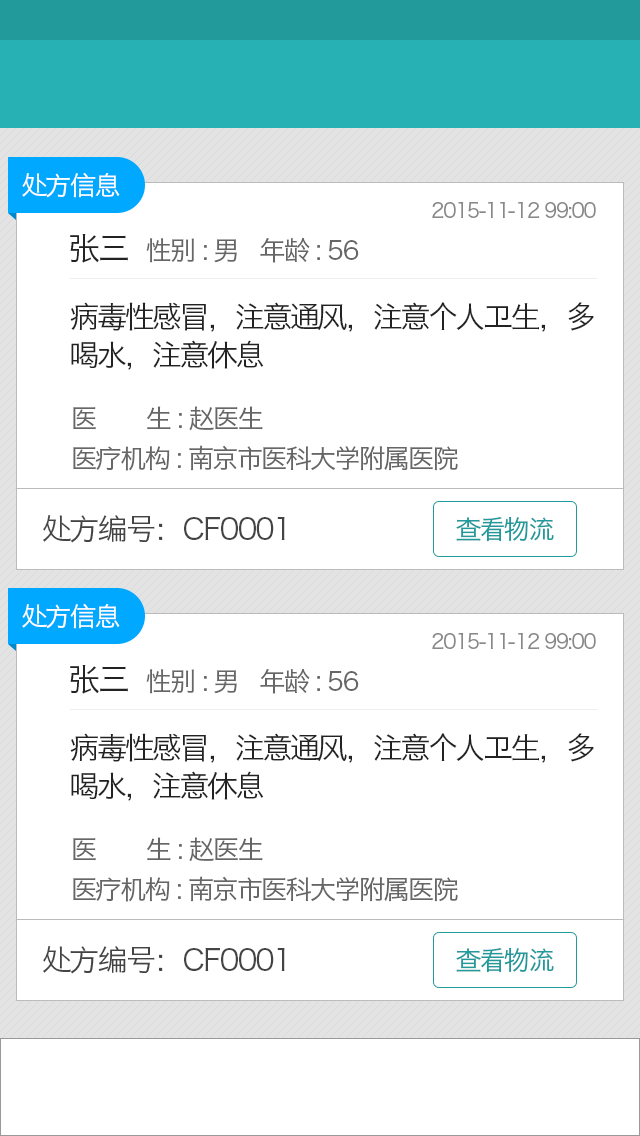
<style>
.page{position:relative;width:640px;height:1136px;background:#ffffff}
.page>*{position:absolute;margin:0}
.t1{font:26px "HiraginoSansGB-W3";letter-spacing:-0.06em;color:#fefefe}
.t2{font:20px "HiraginoSansGB-W3";letter-spacing:-0.06em;color:#888888}
.t3{font:26px "HiraginoSansGB-W3";letter-spacing:-0.06em;color:#666666}
.t4{font:32px "HiraginoSansGB-W3";letter-spacing:-0.06em;color:#222222}
.t5{font:30px/38.3px "HiraginoSansGB-W3";letter-spacing:-0.08em;color:#222222}
.t6{font:30px "HiraginoSansGB-W3";letter-spacing:-0.06em;color:#444444}
.t7{font:26px "HiraginoSansGB-W3";letter-spacing:-0.06em;color:#229a9c}
</style>
<div class="page">
<p class="t1" style="left:22px;top:173px;width:98px;height:25px">处方信息</p>
<p class="t2" style="left:432px;top:202px;width:164px;height:16px">2015-11-12 99:00</p>
<p class="t3" style="left:70px;top:234px;width:289px;height:29px"><span class="t4">张三  </span>性别 : 男   年龄 : 56</p>
<p class="t5" style="left:70px;top:302px;width:524px;height:68px">病毒性感冒，注意通风，注意个人卫生，多<br>喝水，注意休息</p>
<p class="t3" style="left:73px;top:406px;width:190px;height:25px">医       生 : 赵医生</p>
<p class="t3" style="left:73px;top:445px;width:385px;height:26px">医疗机构 : 南京市医科大学附属医院</p>
<p class="t6" style="left:43px;top:515px;width:242px;height:28px">处方编号：CF0001</p>
<p class="t7" style="left:456px;top:516px;width:98px;height:26px">查看物流</p>
<p class="t1" style="left:22px;top:604px;width:98px;height:25px">处方信息</p>
<p class="t2" style="left:432px;top:633px;width:164px;height:16px">2015-11-12 99:00</p>
<p class="t3" style="left:70px;top:665px;width:289px;height:29px"><span class="t4">张三  </span>性别 : 男   年龄 : 56</p>
<p class="t5" style="left:70px;top:733px;width:524px;height:68px">病毒性感冒，注意通风，注意个人卫生，多<br>喝水，注意休息</p>
<p class="t3" style="left:73px;top:837px;width:190px;height:25px">医       生 : 赵医生</p>
<p class="t3" style="left:73px;top:876px;width:385px;height:26px">医疗机构 : 南京市医科大学附属医院</p>
<p class="t6" style="left:43px;top:946px;width:242px;height:28px">处方编号：CF0001</p>
<p class="t7" style="left:456px;top:947px;width:98px;height:26px">查看物流</p>
</div>
